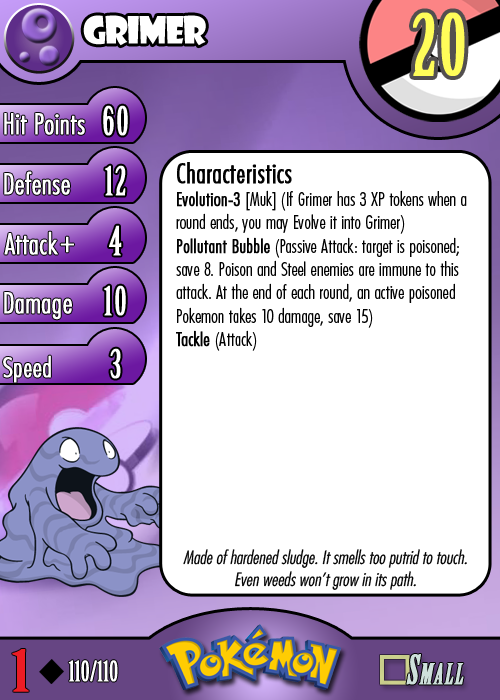
<style>
.page{position:relative;width:500px;height:700px;background:#ffffff}
.page>*{position:absolute;margin:0}
.t1{font:36.7px "ShowcardGothic-Reg";letter-spacing:-0.025em;color:#ffffff;scale:0.91 1}
.t2{font:83.3px "BirchStd";letter-spacing:0.025em;color:#fffd59;font-weight:bold}
.t3{font:27.8px "Futura-CondensedLight";color:#ffffff;font-weight:bold}
.t4{font:38.9px "BirchStd";letter-spacing:0.035em;color:#ffffff;font-weight:bold}
.t5{font:19.4px "FuturaCondensedBQ-Light";color:#010101}
.t6{font:27.8px "FuturaCondensedBQ-Light";color:#010101;font-weight:bold}
.t7{font:19.4px "FuturaCondensedBQ-Light";color:#010101;font-weight:bold}
.t8{font:30.6px "Futura-CondensedLight";color:#ffffff;font-weight:bold}
.t9{font:27.8px "FuturaCondensedBQ-Light";color:#ffffff;font-weight:bold}
.t10{font:18.1px "Futura-CondensedLight";color:#010101;font-style:italic}
.t11{font:55.6px "BirchStd";color:#ed1c24;font-weight:bold;scale:1.5 1}
.t12{font:27.8px "BirchStd";color:#ffffff;font-weight:bold}
</style>
<div class="page">
<p class="t1" style="left:83px;top:15px;width:123px;height:31px">grimer</p>
<p class="t2" style="left:413px;top:12px;width:52px;height:64px">20</p>
<p class="t3" style="left:4px;top:113px;width:81px;height:22px">Hit Points</p>
<p class="t4" style="left:103px;top:105px;width:25px;height:31px">60</p>
<p class="t3" style="left:4px;top:171px;width:66px;height:24px">Defense</p>
<p class="t4" style="left:105px;top:165px;width:21px;height:31px">12</p>
<p class="t5" style="left:176px;top:162px;width:291px;height:189px"><span class="t6">Characteristics<br></span><span class="t7">Evolution-3 </span>[Muk] (If Grimer has 3 XP tokens when a round ends, you may Evolve it into Grimer)<br><span class="t7">Pollutant Bubble</span> (Passive Attack: target is poisoned; save 8. Poison and Steel enemies are immune to this attack. At the end of each round, an active poisoned Pokemon takes 10 damage, save 15)<br><span class="t7">Tackle </span>(Attack)</p>
<p class="t3" style="left:4px;top:231px;width:54px;height:24px">Attack</p>
<p class="t4" style="left:109px;top:225px;width:13px;height:31px">4</p>
<p class="t8" style="left:60px;top:236px;width:14px;height:17px">+</p>
<p class="t3" style="left:4px;top:292px;width:68px;height:28px">Damage</p>
<p class="t4" style="left:104px;top:285px;width:22px;height:31px">10</p>
<p class="t4" style="left:110px;top:348px;width:11px;height:31px">3</p>
<p class="t9" style="left:3px;top:355px;width:48px;height:28px">Speed</p>
<p class="t10" style="left:183px;top:549px;width:284px;height:41px;text-align:center">Made of hardened sludge. It smells too putrid to touch. Even weeds won’t grow in its path.</p>
<p class="t11" style="left:12px;top:649px;width:17px;height:43px">1</p>
<p class="t12" style="left:68px;top:660px;width:50px;height:22px">110/110</p>
</div>
